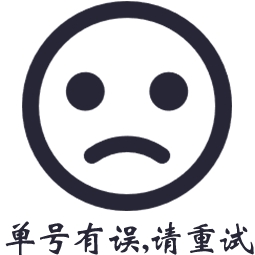
<style>
.page{position:relative;width:255px;height:255px;background:#ffffff}
.page>*{position:absolute;margin:0}
.t1{font:37.5px "STXinwei";letter-spacing:-0.08em;color:#272636}
</style>
<div class="page">
<p class="t1" style="left:5px;top:221px;width:249px;height:35px">单号有误,请重试</p>
</div>
